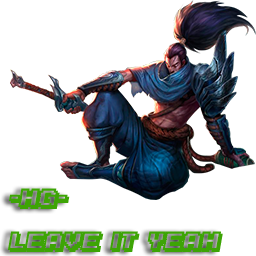
<style>
.page{position:relative;width:256px;height:256px;background:#ffffff}
.page>*{position:absolute;margin:0}
.t1{font:36px "KarmaticArcade";color:#3da405;font-style:italic}
</style>
<div class="page">
<p class="t1" style="left:8px;top:188px;width:215px;height:64px">-hg-<br>Leave  It  Yeah</p>
</div>
